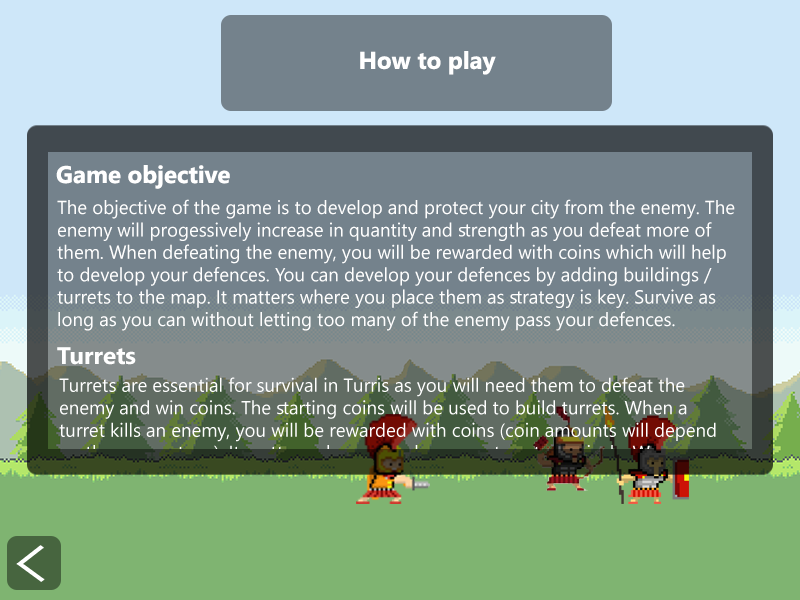
<style>
.page{position:relative;width:800px;height:600px;background:#74828c}
.page>*{position:absolute;margin:0}
.t1{font:24px "SegoeUI-Bold";color:#ffffff}
.t2{font:18.7px "SegoeUI";color:#ffffff}
</style>
<div class="page">
<p class="t1" style="left:360px;top:51px;width:136px;height:24px">How to play</p>
<p class="t1" style="left:56px;top:165px;width:174px;height:24px">Game objective</p>
<p class="t2" style="left:57px;top:199px;width:678px;height:132px">The objective of the game is to develop and protect your city from the enemy. The enemy will progessively increase in quantity and strength as you defeat more of them. When defeating the enemy, you will be rewarded with coins which will help to develop your defences. You can develop your defences by adding buildings / turrets to the map. It matters where you place them as strategy is key. Survive as long as you can without letting too many of the enemy pass your defences.</p>
<p class="t1" style="left:57px;top:347px;width:79px;height:18px">Turrets</p>
</div>
